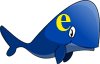
<style>
.page{position:relative;width:100px;height:64px;background:#ffffff}
.page>*{position:absolute;margin:0}
.t1{font:37.5px "TimesNewRomanPS-BoldMT";color:#ffed00}
</style>
<div class="page">
<p class="t1" style="left:56px;top:14px;width:15px;height:17px">e</p>
</div>
